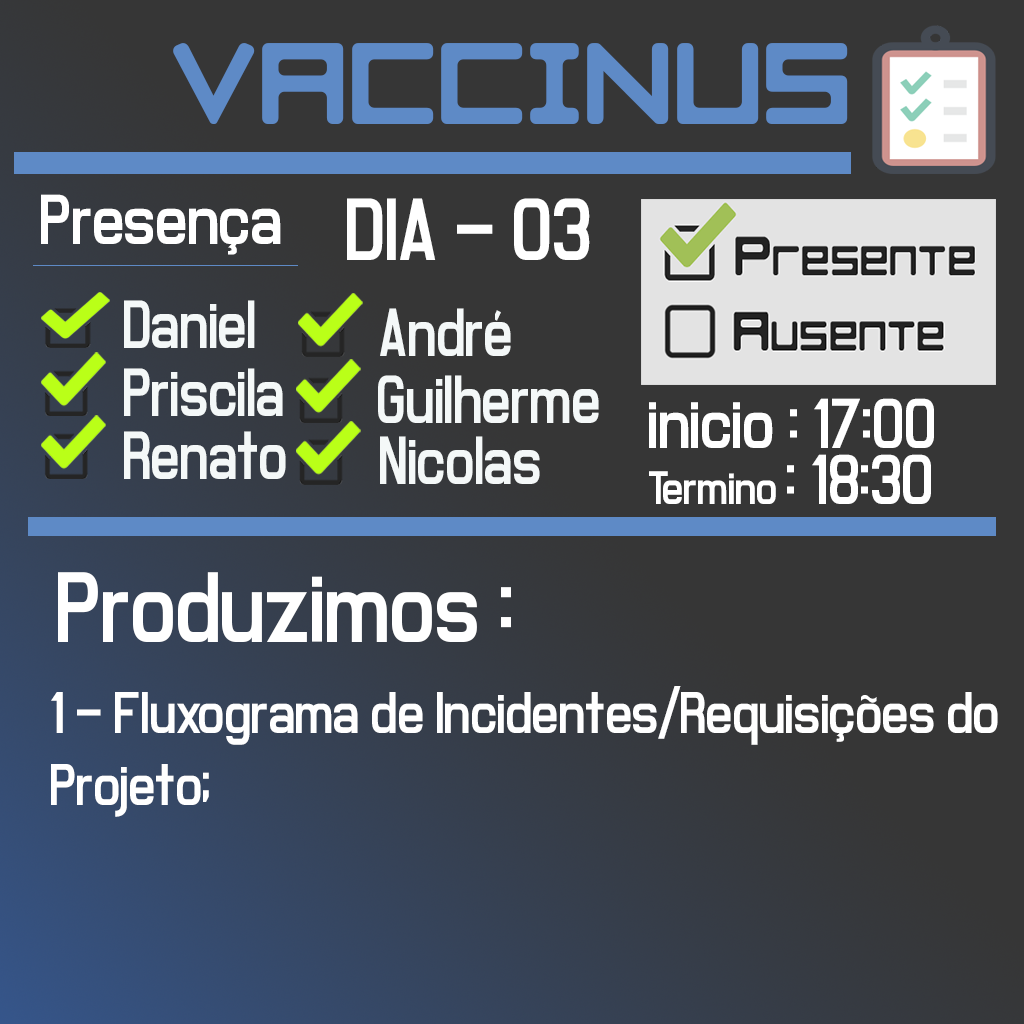
<style>
.page{position:relative;width:1024px;height:1024px;background:#363636}
.page>*{position:absolute;margin:0}
.t1{font:102px "RazerBlackwidow-Regular";color:#5e8ac6}
.t2{font:72px "MilestoneOne";color:#ffffff}
.t3{font:90px "MilestoneOne";color:#ffffff}
.t4{font:69.4px "MilestoneOne";color:#f4f8f8;scale:0.94 1}
.t5{font:48px "MilestoneOne";color:#ffffff}
.t6{font:102px "MilestoneOne";color:#ffffff}
.t7{font:60px "MilestoneOne";color:#ffffff}
</style>
<div class="page">
<p class="t1" style="left:173px;top:43px;width:675px;height:81px">VACCINUS</p>
<p class="t2" style="left:41px;top:194px;width:240px;height:61px">Presença</p>
<p class="t3" style="left:347px;top:198px;width:243px;height:62px">DIA - 03</p>
<p class="t4" style="left:124px;top:300px;width:131px;height:48px">Daniel</p>
<p class="t4" style="left:380px;top:308px;width:131px;height:48px">André</p>
<p class="t4" style="left:124px;top:368px;width:159px;height:48px">Priscila</p>
<p class="t4" style="left:378px;top:375px;width:221px;height:48px">Guilherme</p>
<p class="t2" style="left:649px;top:398px;width:285px;height:50px">inicio : 17:00</p>
<p class="t4" style="left:124px;top:431px;width:162px;height:48px">Renato</p>
<p class="t4" style="left:380px;top:436px;width:160px;height:48px">Nicolas</p>
<p class="t5" style="left:649px;top:454px;width:282px;height:50px">Termino <span class="t2">: 18:30</span></p>
<p class="t6" style="left:58px;top:572px;width:453px;height:70px">Produzimos :</p>
<p class="t7" style="left:51px;top:686px;width:947px;height:131px">1 - Fluxograma de Incidentes/Requisições do <br>Projeto;</p>
</div>
